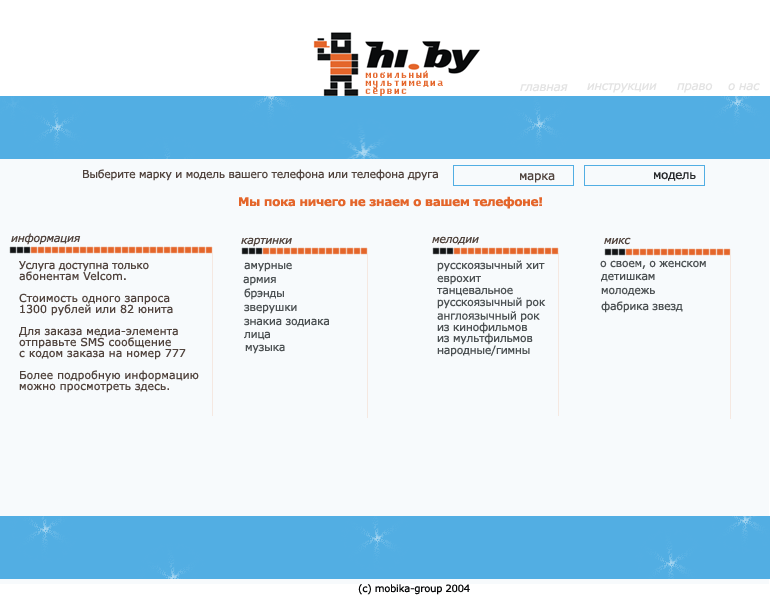
<style>
.page{position:relative;width:770px;height:600px;background:#f7fafc}
.page>*{position:absolute;margin:0}
.t1{font:12px/8px "Fixedsys";letter-spacing:-0.025em;color:#e4662b}
.t2{font:12px "Verdana-Italic";letter-spacing:-0.025em;color:#e3e3e3}
.t3{font:11px "Verdana";letter-spacing:-0.025em;color:#51443e}
.t4{font:12px "Verdana";letter-spacing:-0.025em;color:#51443e}
.t5{font:12px "Verdana";letter-spacing:-0.025em;color:#282a2c}
.t6{font:12px "Verdana-Bold";letter-spacing:-0.025em;color:#e4662b}
.t7{font:11px "Verdana-Italic";letter-spacing:-0.025em;color:#51443e}
.t8{font:11px/11px "Verdana";color:#51443e}
.t9{font:11px/11px "Verdana";letter-spacing:-0.025em;color:#51443e}
.t10{font:11px "Verdana";letter-spacing:-0.025em;color:#4c5153}
.t11{font:10px "Verdana";letter-spacing:-0.025em;color:#070809}
</style>
<div class="page">
<p class="t1" style="left:365px;top:70px;width:78px;height:27px">мобильный <br>мультимедиа<br>сервис</p>
<p class="t2" style="left:520px;top:84px;width:48px;height:8px">главная</p>
<p class="t2" style="left:587px;top:83px;width:70px;height:10px">инструкции</p>
<p class="t2" style="left:677px;top:83px;width:36px;height:10px">право</p>
<p class="t2" style="left:728px;top:83px;width:32px;height:8px">о нас</p>
<p class="t3" style="left:83px;top:169px;width:355px;height:12px">Выберите марку и модель вашего телефона или телефона друга</p>
<p class="t4" style="left:520px;top:173px;width:35px;height:10px">марка</p>
<p class="t5" style="left:654px;top:172px;width:42px;height:9px">модель</p>
<p class="t6" style="left:239px;top:196px;width:303px;height:13px">Мы пока ничего не знаем о вашем телефоне!</p>
<p class="t7" style="left:11px;top:233px;width:70px;height:12px">информация</p>
<p class="t7" style="left:241px;top:237px;width:51px;height:10px">картинки</p>
<p class="t7" style="left:432px;top:236px;width:47px;height:9px">мелодии</p>
<p class="t7" style="left:604px;top:237px;width:27px;height:8px">микс</p>
<p class="t8" style="left:19px;top:261px;width:180px;height:132px"><span class="t9">Услуга доступна только</span><br>абонентам Velcom.<br><br>Стоимость одного запроса<br>1300 рублей или 82 юнита<br><br>Для заказа медиа-элемента <br>отправьте SMS сообщение <br>с кодом заказа на номер 777<br><br>Более подробную информацию <br>можно просмотреть здесь.</p>
<p class="t10" style="left:244px;top:262px;width:48px;height:10px">амурные</p>
<p class="t10" style="left:437px;top:260px;width:108px;height:12px">русскоязычный хит</p>
<p class="t10" style="left:600px;top:260px;width:106px;height:9px">о своем, о женском</p>
<p class="t10" style="left:243px;top:276px;width:33px;height:10px">армия</p>
<p class="t10" style="left:437px;top:275px;width:44px;height:10px">еврохит</p>
<p class="t10" style="left:601px;top:273px;width:54px;height:9px">детишкам</p>
<p class="t10" style="left:244px;top:288px;width:40px;height:12px">брэнды</p>
<p class="t10" style="left:437px;top:287px;width:76px;height:9px">танцевальное</p>
<p class="t10" style="left:601px;top:287px;width:54px;height:9px">молодежь</p>
<p class="t10" style="left:244px;top:304px;width:53px;height:10px">зверушки</p>
<p class="t10" style="left:437px;top:297px;width:109px;height:12px">русскоязычный рок</p>
<p class="t10" style="left:601px;top:301px;width:82px;height:12px">фабрика звезд</p>
<p class="t10" style="left:244px;top:318px;width:85px;height:9px">знакиа зодиака</p>
<p class="t10" style="left:437px;top:311px;width:103px;height:11px">англоязычный рок</p>
<p class="t10" style="left:437px;top:322px;width:91px;height:12px">из кинофильмов</p>
<p class="t10" style="left:244px;top:331px;width:26px;height:9px">лица</p>
<p class="t10" style="left:437px;top:333px;width:96px;height:12px">из мультфильмов</p>
<p class="t10" style="left:245px;top:344px;width:40px;height:10px">музыка</p>
<p class="t10" style="left:437px;top:345px;width:93px;height:12px">народные/гимны</p>
<p class="t11" style="left:358px;top:584px;width:112px;height:11px">(c) mobika-group 2004</p>
</div>
